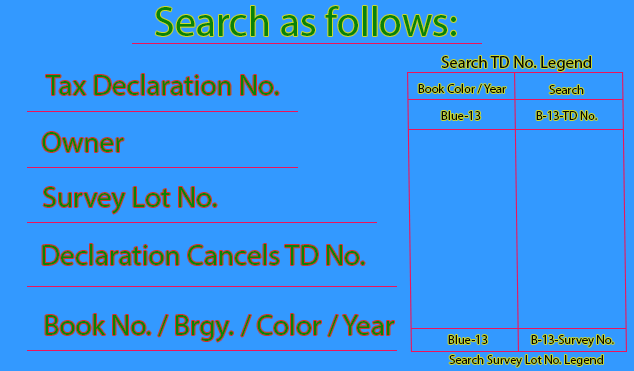
<style>
.page{position:relative;width:634px;height:371px;background:#3399ff}
.page>*{position:absolute;margin:0}
.t1{font:41.7px "MyriadPro-Regular";color:#088308}
.t2{font:16.7px "MyriadPro-Regular";color:#070707}
.t3{font:29.2px "MyriadPro-Regular";color:#088308}
.t4{font:12.5px "MyriadPro-Regular";color:#030303}
.t5{font:12.5px "MyriadPro-Regular";color:#070707}
</style>
<div class="page">
<p class="t1" style="left:155px;top:6px;width:301px;height:30px">Search as follows:</p>
<p class="t2" style="left:441px;top:56px;width:150px;height:15px">Search TD No. Legend</p>
<p class="t3" style="left:46px;top:74px;width:233px;height:21px">Tax Declaration No.</p>
<p class="t4" style="left:418px;top:84px;width:88px;height:10px">Book Color / Year</p>
<p class="t5" style="left:549px;top:85px;width:35px;height:9px">Search</p>
<p class="t5" style="left:441px;top:111px;width:40px;height:9px">Blue-13</p>
<p class="t5" style="left:536px;top:111px;width:61px;height:9px">B-13-TD No.</p>
<p class="t3" style="left:42px;top:132px;width:82px;height:20px">Owner</p>
<p class="t3" style="left:43px;top:187px;width:174px;height:27px">Survey Lot No.</p>
<p class="t3" style="left:42px;top:244px;width:323px;height:21px">Declaration Cancels TD No.</p>
<p class="t3" style="left:45px;top:314px;width:349px;height:28px">Book No. / Brgy. / Color / Year</p>
<p class="t5" style="left:448px;top:335px;width:40px;height:9px">Blue-13</p>
<p class="t5" style="left:531px;top:335px;width:83px;height:12px">B-13-Survey No.</p>
<p class="t5" style="left:449px;top:355px;width:154px;height:12px">Search Survey Lot No. Legend</p>
</div>
